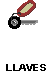
<style>
.page{position:relative;width:53px;height:71px;background:#ffffff}
.page>*{position:absolute;margin:0}
.t1{font:10.3px "Arial-BoldMT";color:#000000;scale:1.11 1}
</style>
<div class="page">
<p class="t1" style="left:6px;top:64px;width:40px;height:7px">LLAVES</p>
</div>
